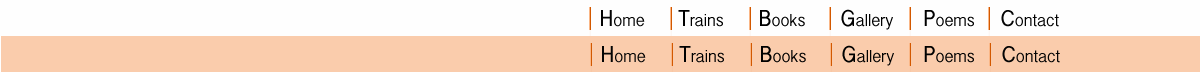
<style>
.page{position:relative;width:1200px;height:72px;background:#faccac}
.page>*{position:absolute;margin:0}
.t1{font:18px "InaiMathi";color:#040404}
.t2{font:24px "InaiMathi";color:#040404}
.t3{font:18px "InaiMathi";color:#000000}
.t4{font:24px "InaiMathi";color:#000000}
</style>
<div class="page">
<p class="t1" style="left:601px;top:10px;width:44px;height:17px"><span class="t2">H</span>ome</p>
<p class="t3" style="left:678px;top:10px;width:45px;height:17px"><span class="t4">T</span>rains</p>
<p class="t3" style="left:760px;top:10px;width:45px;height:17px"><span class="t4">B</span>ooks</p>
<p class="t3" style="left:841px;top:9px;width:52px;height:21px"><span class="t4">G</span>allery</p>
<p class="t3" style="left:924px;top:10px;width:50px;height:17px"><span class="t4">P</span>oems</p>
<p class="t1" style="left:1001px;top:10px;width:58px;height:17px"><span class="t2">C</span>ontact</p>
</div>
